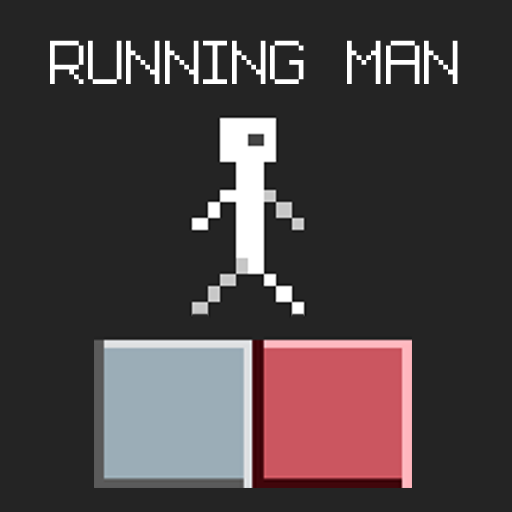
<style>
.page{position:relative;width:512px;height:512px;background:#242424}
.page>*{position:absolute;margin:0}
.t1{font:96px "Advanced_Pixel-7";color:#ffffff}
</style>
<div class="page">
<p class="t1" style="left:50px;top:40px;width:408px;height:44px">RUNNING MAN</p>
</div>
